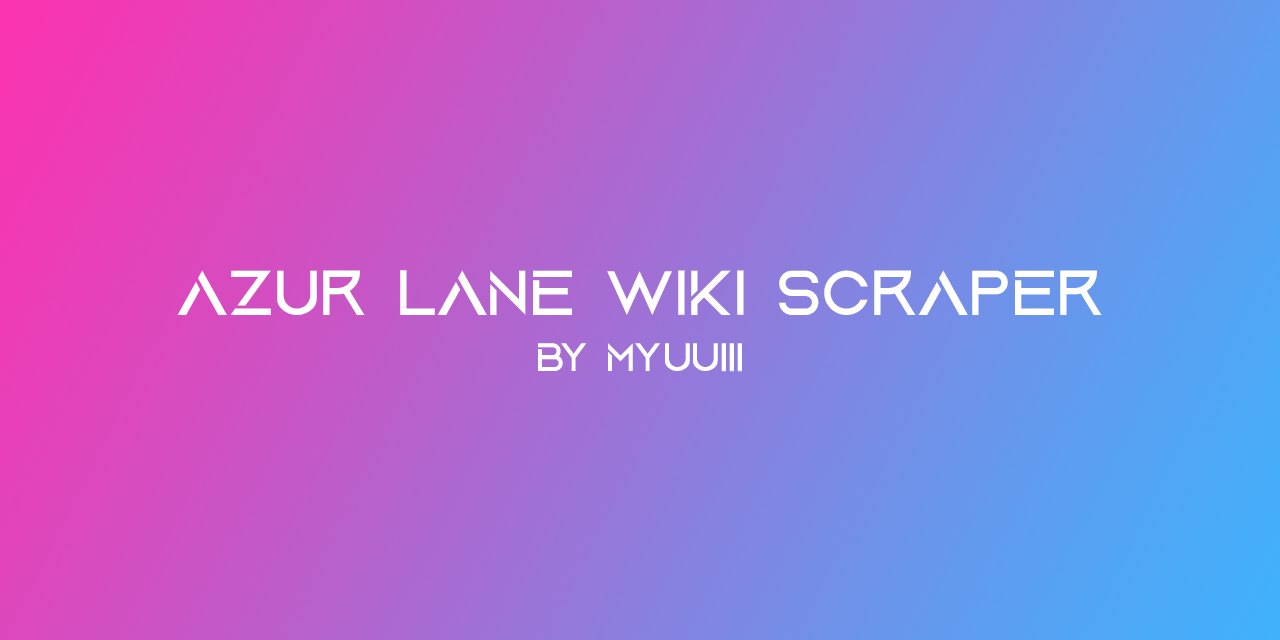
<style>
.page{position:relative;width:1280px;height:640px}
.page>*{position:absolute;margin:0}
.t1{font:66.7px "AquireRegular";color:#ffffff}
.t2{font:41.7px "AquireRegular";color:#ffffff}
</style>
<div class="page">
<p class="t1" style="left:177px;top:270px;width:925px;height:45px">Azur Lane Wiki Scraper</p>
<p class="t2" style="left:538px;top:343px;width:204px;height:29px">By Myuuiii</p>
</div>
